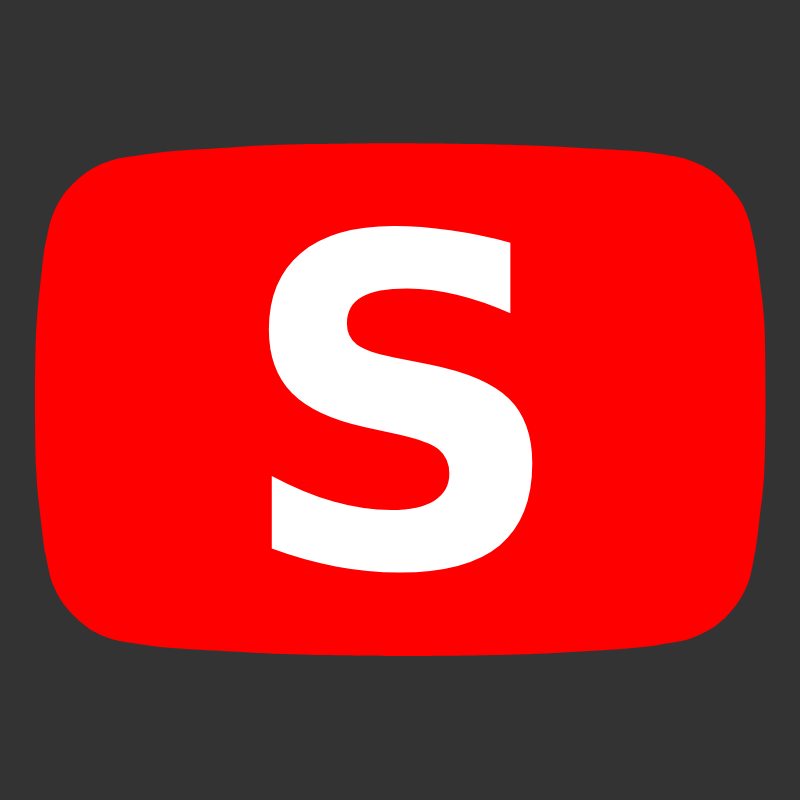
<style>
.page{position:relative;width:800px;height:800px;background:#ff0000}
.page>*{position:absolute;margin:0}
.t1{font:457.9px "DejaVuSans-Bold";color:#ffffff}
</style>
<div class="page">
<p class="t1" style="left:268px;top:226px;width:265px;height:347px">S</p>
</div>
